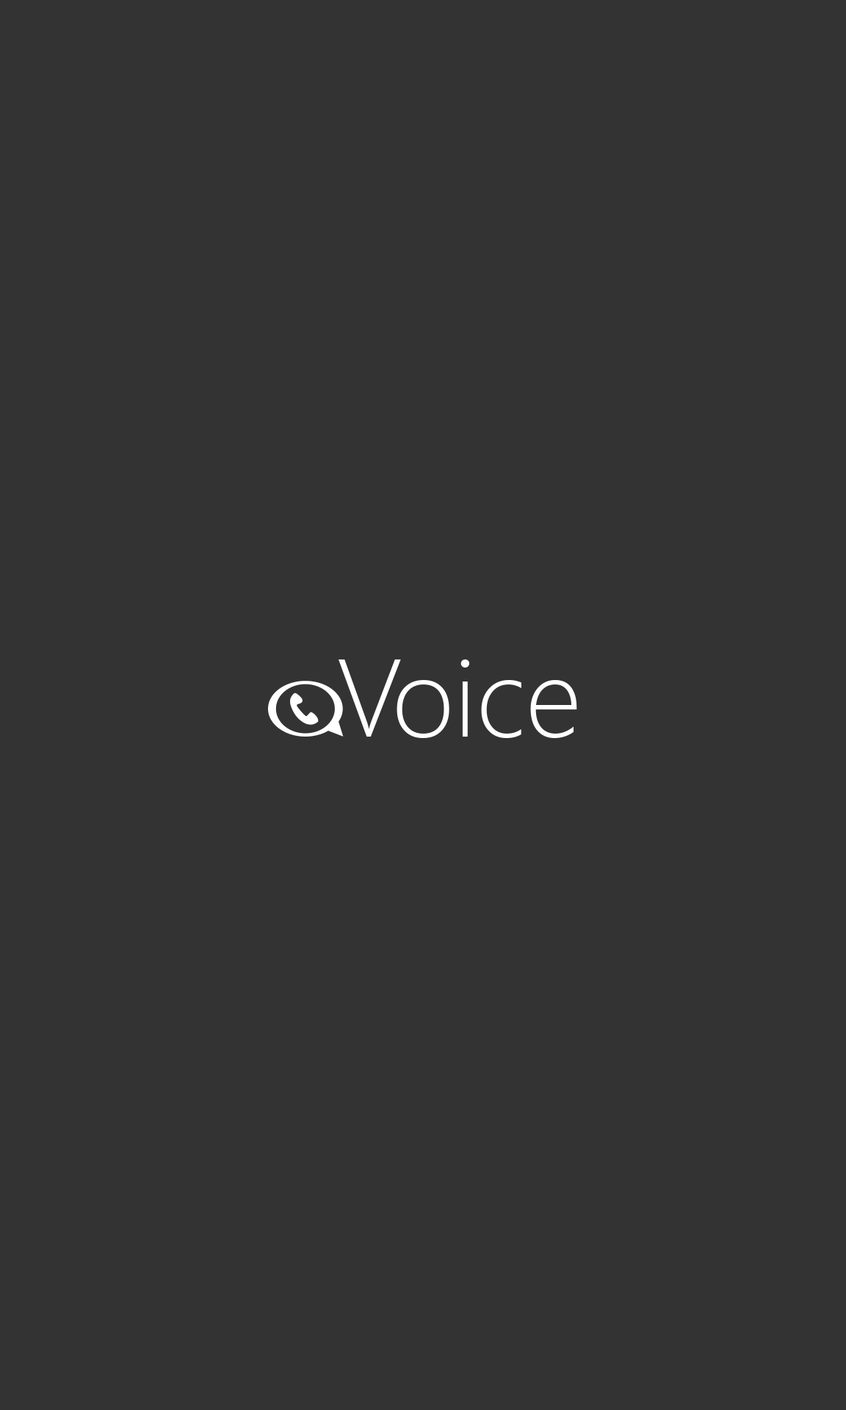
<style>
.page{position:relative;width:846px;height:1410px;background:#333333}
.page>*{position:absolute;margin:0}
.t1{font:110.1px "SegoeUI-Light";color:#ffffff}
</style>
<div class="page">
<p class="t1" style="left:338px;top:659px;width:239px;height:79px">Voice</p>
</div>
